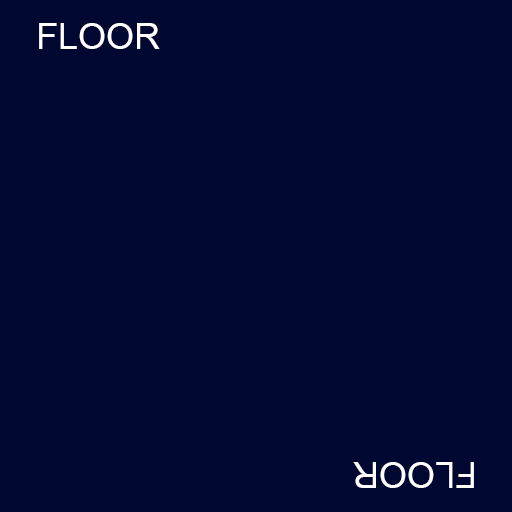
<style>
.page{position:relative;width:512px;height:512px;background:#000731}
.page>*{position:absolute;margin:0}
.t1{font:36px "ArialMT";color:#ffffff}
.t2{font:36.4px "ArialMT";color:#ffffff}
</style>
<div class="page">
<p class="t1" style="left:39px;top:23px;width:121px;height:26px">FLOOR</p>
<p class="t2" style="left:353px;top:462px;width:121px;height:26px;rotate:180deg">FLOOR</p>
</div>
